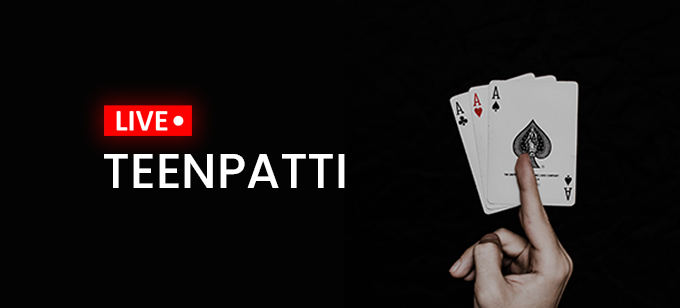
<style>
.page{position:relative;width:680px;height:308px;background:#030303}
.page>*{position:absolute;margin:0}
.t1{font:49px "Poppins-Medium";color:#ffffff}
</style>
<div class="page">
<p class="t1" style="left:104px;top:154px;width:241px;height:34px">TEENPATTI</p>
</div>
